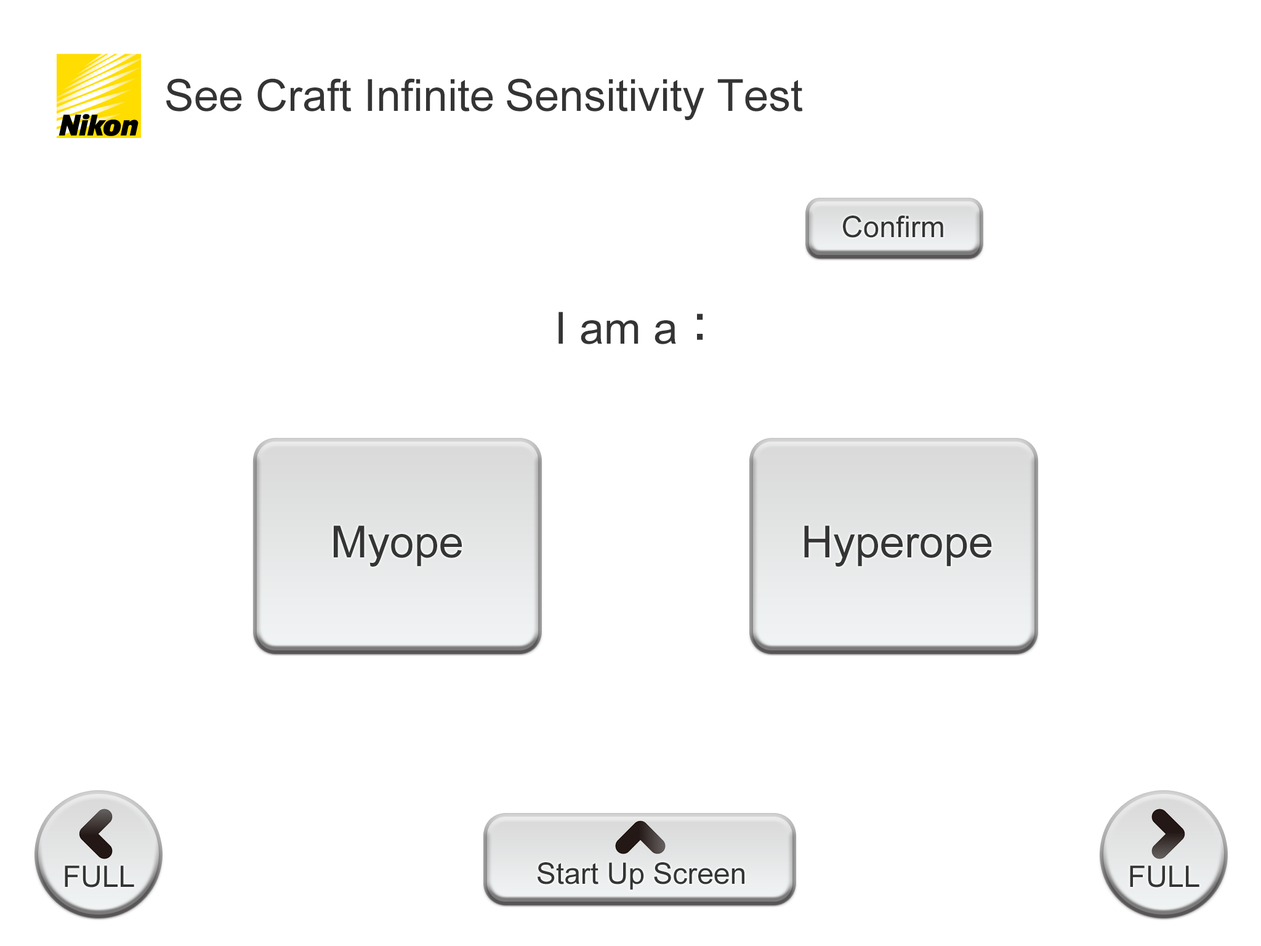
<style>
.page{position:relative;width:1261px;height:946px;background:#ffffff}
.page>*{position:absolute;margin:0}
.t1{font:44.3px "ArialMT";color:#343434}
.t2{font:29.6px "ArialMT";color:#343434}
.t3{font:44.3px "ShinGoPro-Medium";color:#343434}
</style>
<div class="page">
<p class="t1" style="left:166px;top:78px;width:637px;height:42px">See Craft Infinite Sensitivity Test</p>
<p class="t2" style="left:843px;top:215px;width:100px;height:23px">Confirm</p>
<p class="t1" style="left:558px;top:312px;width:145px;height:32px">I am a<span class="t3">：</span></p>
<p class="t1" style="left:334px;top:525px;width:128px;height:41px">Myope</p>
<p class="t1" style="left:804px;top:525px;width:188px;height:41px">Hyperope</p>
<p class="t2" style="left:65px;top:865px;width:69px;height:22px">FULL</p>
<p class="t2" style="left:537px;top:862px;width:207px;height:28px">Start Up Screen</p>
<p class="t2" style="left:1130px;top:865px;width:69px;height:22px">FULL</p>
</div>
